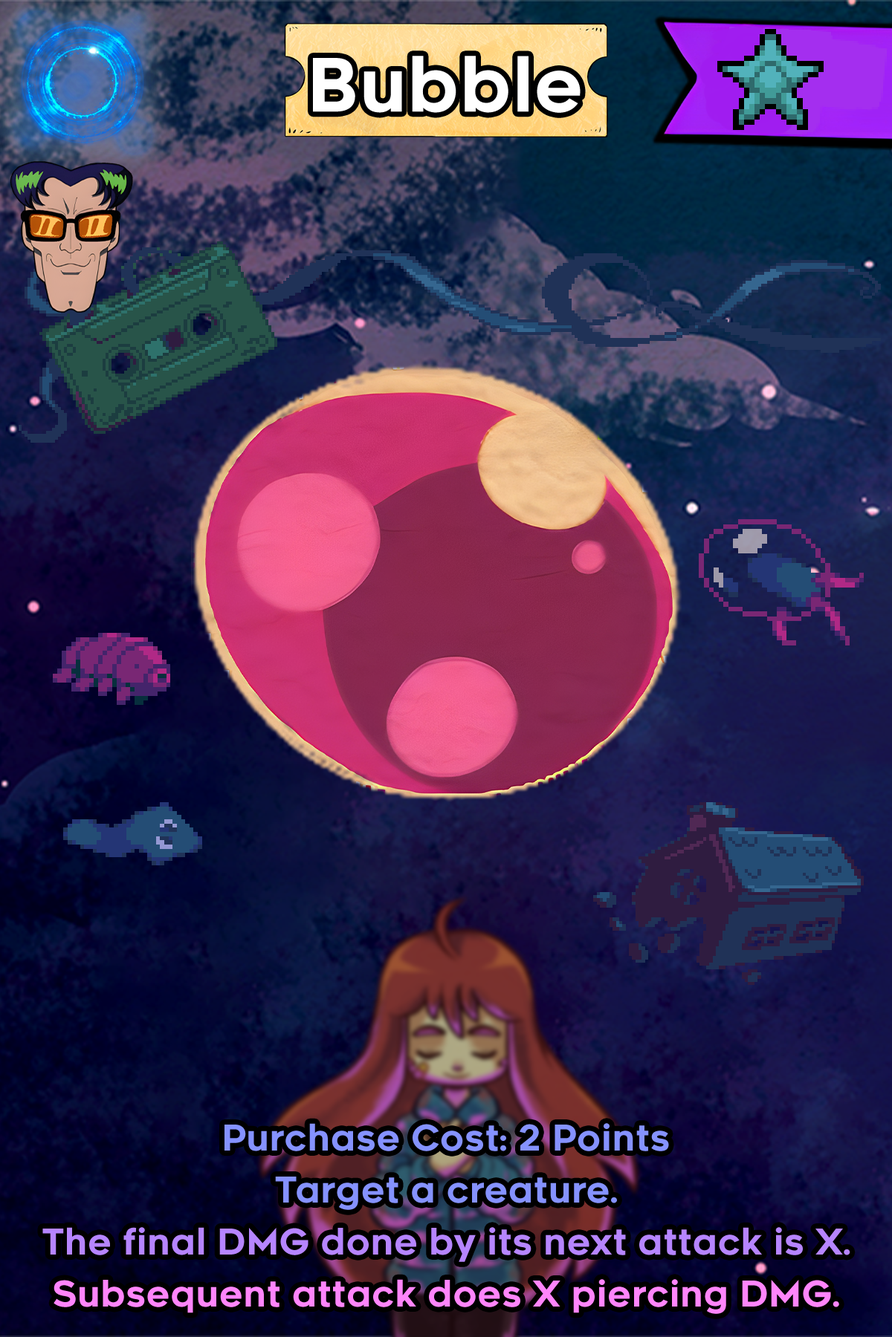
<style>
.page{position:relative;width:892px;height:1337px}
.page>*{position:absolute;margin:0}
.t1{font:126.1px "Renogare-Regular";color:#ffffff}
.t2{font:60.9px/52px "Renogare-Regular";color:#b685ff}
.t3{font:60.9px/52px "Renogare-Regular";color:#8592ff}
.t4{font:60.9px/52px "Renogare-Regular";color:#ff85fb}
</style>
<div class="page">
<p class="t1" style="left:313px;top:56px;width:267px;height:57px">Bubble</p>
<p class="t2" style="left:42px;top:1123px;width:808px;height:191px;text-align:center"><span class="t3">Purchase Cost: 2 Points<br>Target a creature.<br></span>The final DMG done by its next attack is X.<br><span class="t4">Subsequent attack does X piercing DMG.</span></p>
</div>
